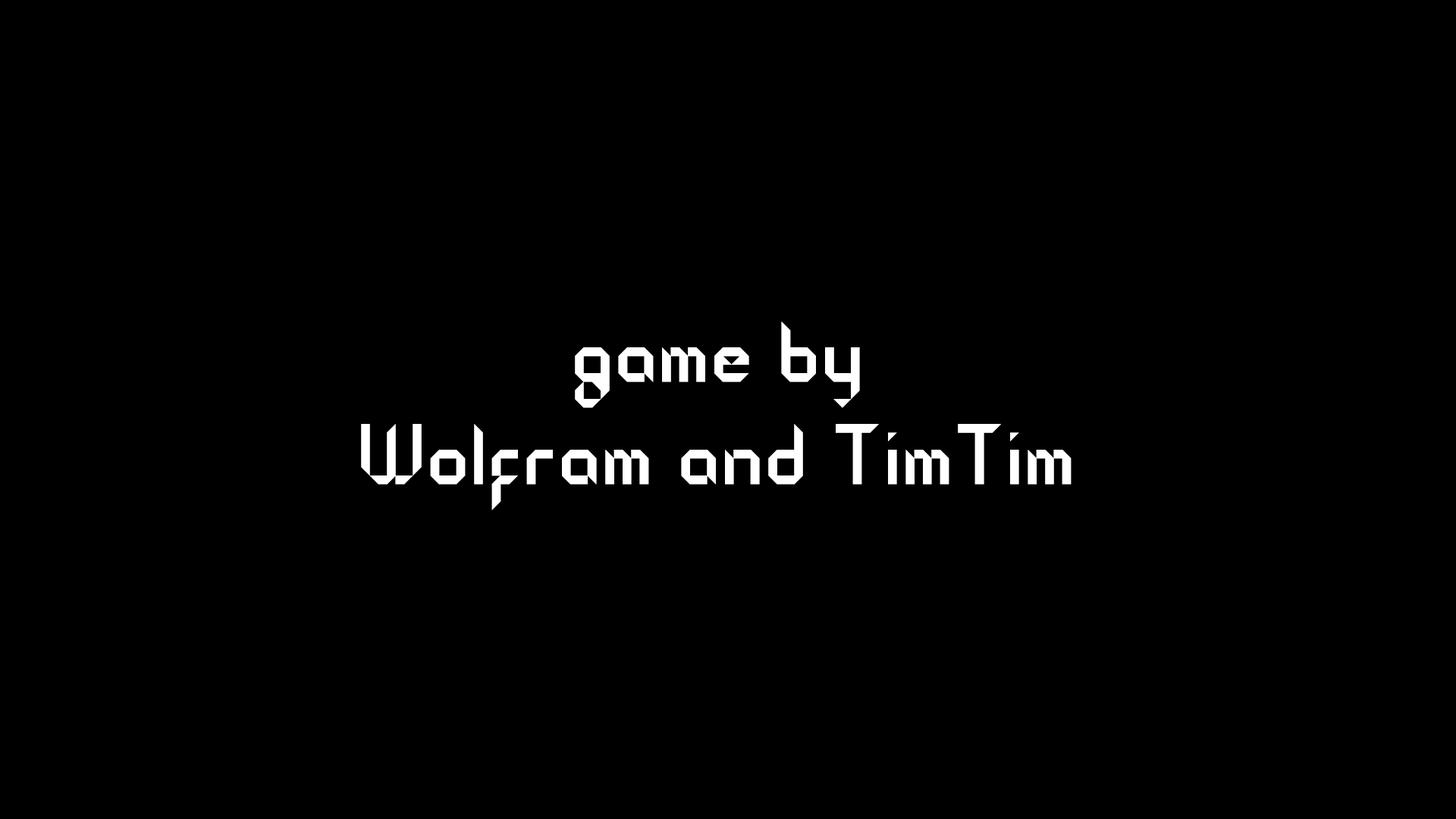
<style>
.page{position:relative;width:1456px;height:819px;background:#000000}
.page>*{position:absolute;margin:0}
.t1{font:85.3px "RMSSansRegular";letter-spacing:0.04em;color:#ffffff}
</style>
<div class="page">
<p class="t1" style="left:361px;top:322px;width:711px;height:188px;text-align:center">game by <br>Wolfram and TimTim</p>
</div>
